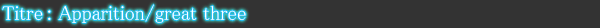
<style>
.page{position:relative;width:600px;height:28px;background:#333333}
.page>*{position:absolute;margin:0}
.t1{font:20px "MS-PMincho";color:#ffffff}
</style>
<div class="page">
<p class="t1" style="left:2px;top:4px;width:244px;height:19px">Titre : Apparition/great three</p>
</div>
